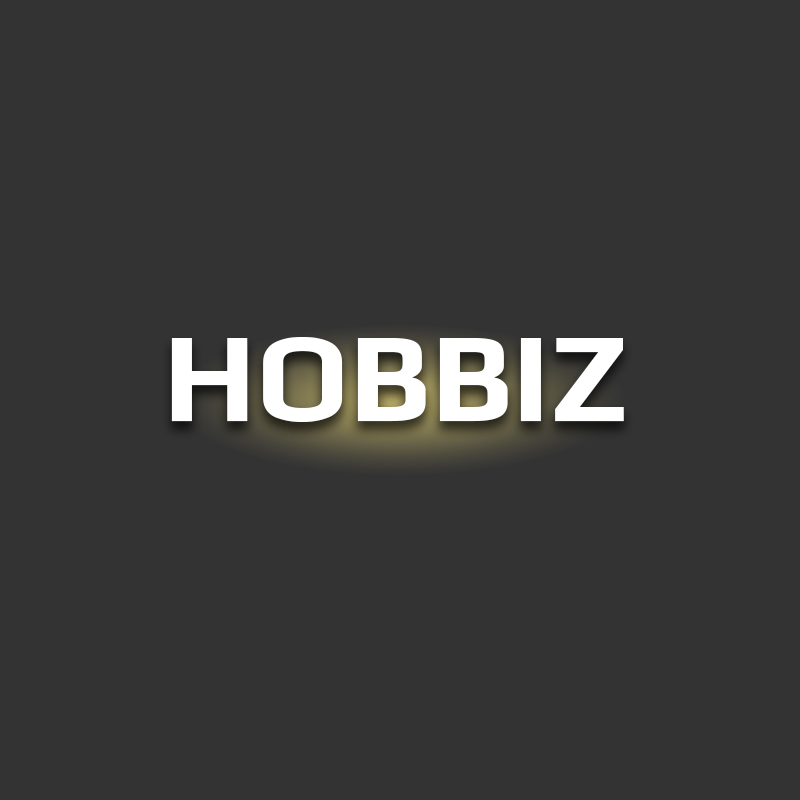
<style>
.page{position:relative;width:800px;height:800px;background:#333333}
.page>*{position:absolute;margin:0}
.t1{font:128px "Play-Bold";color:#ffffff}
</style>
<div class="page">
<p class="t1" style="left:171px;top:337px;width:453px;height:85px">HOBBIZ</p>
</div>
